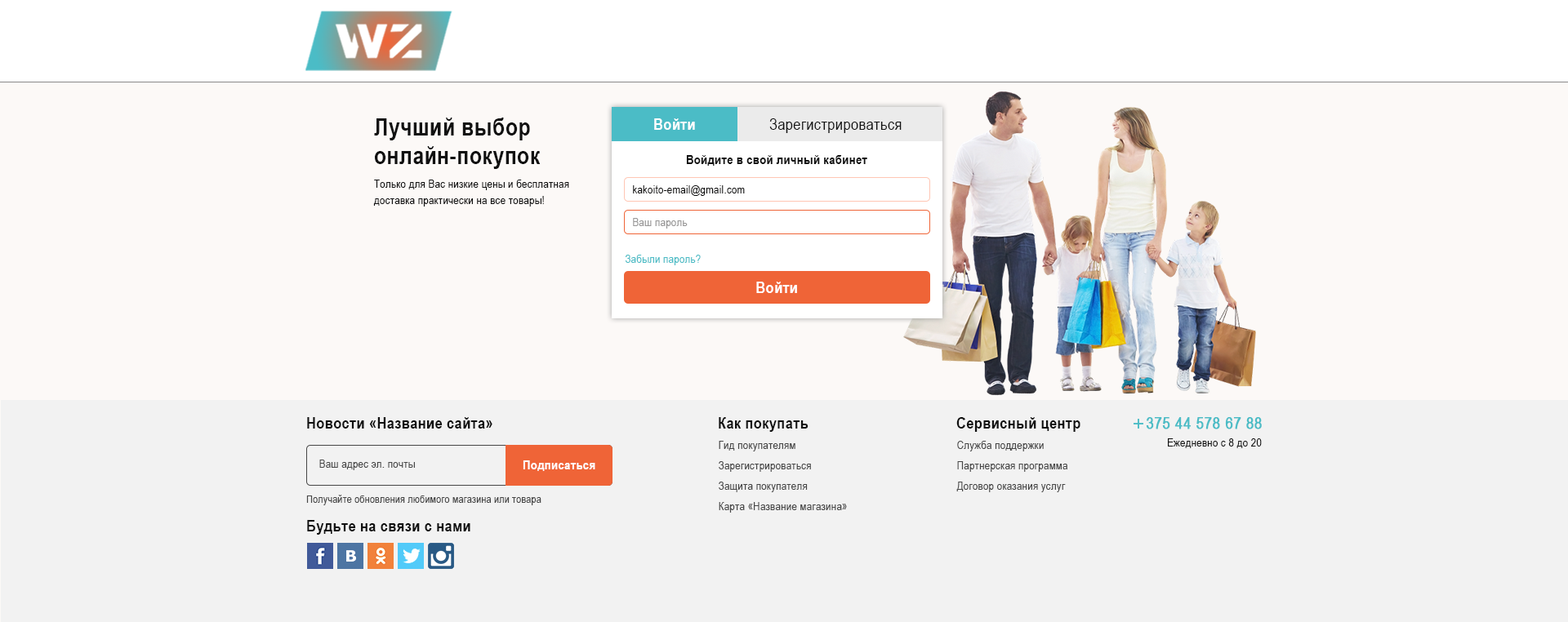
<style>
.page{position:relative;width:1568px;height:622px;background:#fcf9f7}
.page>*{position:absolute;margin:0}
.t1{font:24.5px/28.6px "ArialNarrow-Bold";letter-spacing:0.02em;color:#111111}
.t2{font:16.3px "ArialNarrow-Bold";letter-spacing:0.02em;color:#ffffff}
.t3{font:16.3px "ArialNarrow";letter-spacing:0.02em;color:#111111}
.t4{font:13.1px "ArialNarrow-Bold";letter-spacing:0.02em;color:#111111}
.t5{font:11.4px/16.3px "ArialNarrow";letter-spacing:0.02em;color:#111111}
.t6{font:11.4px "ArialNarrow";letter-spacing:0.02em;color:#111111}
.t7{font:11.4px "ArialNarrow";letter-spacing:0.02em;color:#989797}
.t8{font:11.4px "ArialNarrow";letter-spacing:0.02em;color:#4bbcc6}
.t9{font:16.3px "ArialNarrow-Bold";letter-spacing:0.02em;color:#111111}
.t10{font:16.3px "ArialNarrow";letter-spacing:0.02em;color:#4bbcc6;font-weight:bold}
.t11{font:11.4px "ArialNarrow";letter-spacing:0.02em;color:#464646}
.t12{font:13.1px "ArialNarrow-Bold";letter-spacing:0.02em;color:#ffffff}
.t13{font:10.6px "ArialNarrow";letter-spacing:0.02em;color:#464646}
</style>
<div class="page">
<p class="t1" style="left:374px;top:118px;width:167px;height:51px">Лучший выбор<br>онлайн-покупок</p>
<p class="t2" style="left:654px;top:118px;width:41px;height:12px">Войти</p>
<p class="t3" style="left:769px;top:118px;width:133px;height:15px">Зарегистрироваться</p>
<p class="t4" style="left:686px;top:155px;width:181px;height:11px">Войдите в свой личный кабинет</p>
<p class="t5" style="left:373px;top:180px;width:196px;height:27px">Только для Вас низкие цены и бесплатная<br>  доставка практически на все товары!</p>
<p class="t6" style="left:633px;top:185px;width:112px;height:11px">kakoito-email@gmail.com</p>
<p class="t7" style="left:633px;top:218px;width:55px;height:11px">Ваш пароль</p>
<p class="t8" style="left:626px;top:255px;width:75px;height:10px">Забыли пароль?</p>
<p class="t2" style="left:756px;top:282px;width:41px;height:11px">Войти</p>
<p class="t9" style="left:307px;top:417px;width:185px;height:12px">Новости «Название сайта»</p>
<p class="t9" style="left:719px;top:417px;width:89px;height:15px">Как покупать</p>
<p class="t9" style="left:956px;top:417px;width:124px;height:15px">Сервисный центр</p>
<p class="t10" style="left:1146px;top:417px;width:116px;height:13px">375 44 578 67 88</p>
<p class="t11" style="left:719px;top:441px;width:76px;height:11px">Гид покупателям</p>
<p class="t11" style="left:957px;top:441px;width:87px;height:11px">Служба поддержки</p>
<p class="t6" style="left:1168px;top:439px;width:94px;height:9px">Ежедневно с 8 до 20</p>
<p class="t11" style="left:319px;top:460px;width:96px;height:10px">Ваш адрес эл. почты</p>
<p class="t12" style="left:523px;top:461px;width:72px;height:10px">Подписаться</p>
<p class="t11" style="left:719px;top:461px;width:92px;height:11px">Зарегистрироваться</p>
<p class="t11" style="left:957px;top:461px;width:110px;height:11px">Партнерская программа</p>
<p class="t11" style="left:719px;top:482px;width:89px;height:10px">Защита покупателя</p>
<p class="t11" style="left:956px;top:482px;width:110px;height:10px">Договор оказания услуг</p>
<p class="t13" style="left:306px;top:495px;width:235px;height:11px">Получайте обновления любимого магазина или товара</p>
<p class="t11" style="left:719px;top:502px;width:128px;height:11px">Карта «Название магазина»</p>
<p class="t9" style="left:307px;top:520px;width:163px;height:15px">Будьте на связи с нами</p>
</div>
